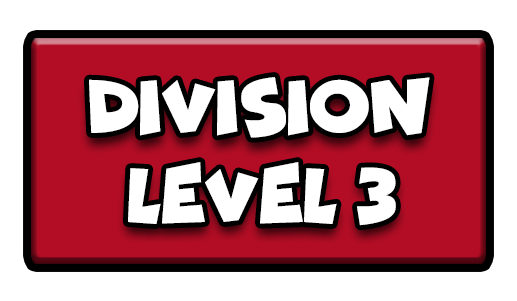
<style>
.page{position:relative;width:517px;height:301px;background:#ffffff}
.page>*{position:absolute;margin:0}
.t1{font:77.7px "Funhouse";color:#ffffff;scale:0.95 1}
</style>
<div class="page">
<p class="t1" style="left:89px;top:77px;width:341px;height:61px">DIVISION</p>
<p class="t1" style="left:128px;top:162px;width:268px;height:64px">LEVEL 3</p>
</div>
